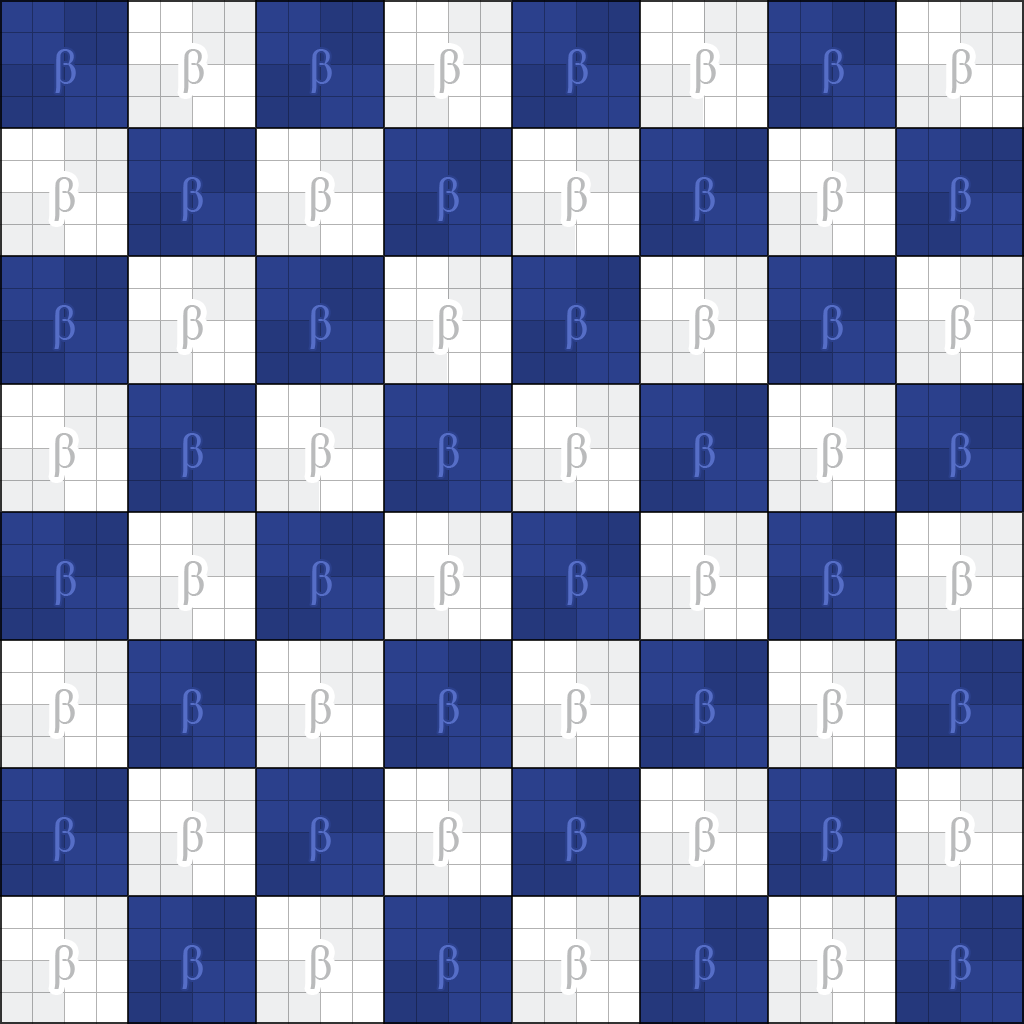
<style>
.page{position:relative;width:1024px;height:1024px;background:#ffffff}
.page>*{position:absolute;margin:0}
.t1{font:48px "TimesNewRomanPSMT";letter-spacing:0.12em;color:#566ec7}
.t2{font:48px "TimesNewRomanPSMT";letter-spacing:0.12em;color:#babbbc}
</style>
<div class="page">
<p class="t1" style="left:55px;top:49px;width:21px;height:44px">β</p>
<p class="t2" style="left:183px;top:49px;width:21px;height:44px">β</p>
<p class="t1" style="left:311px;top:49px;width:21px;height:44px">β</p>
<p class="t2" style="left:439px;top:49px;width:21px;height:44px">β</p>
<p class="t1" style="left:567px;top:49px;width:21px;height:44px">β</p>
<p class="t2" style="left:695px;top:49px;width:21px;height:44px">β</p>
<p class="t1" style="left:823px;top:49px;width:21px;height:44px">β</p>
<p class="t2" style="left:951px;top:49px;width:21px;height:44px">β</p>
<p class="t2" style="left:54px;top:177px;width:21px;height:44px">β</p>
<p class="t1" style="left:182px;top:177px;width:21px;height:44px">β</p>
<p class="t2" style="left:310px;top:177px;width:21px;height:44px">β</p>
<p class="t1" style="left:438px;top:177px;width:21px;height:44px">β</p>
<p class="t2" style="left:566px;top:177px;width:21px;height:44px">β</p>
<p class="t1" style="left:694px;top:177px;width:21px;height:44px">β</p>
<p class="t2" style="left:822px;top:177px;width:21px;height:44px">β</p>
<p class="t1" style="left:950px;top:177px;width:21px;height:44px">β</p>
<p class="t1" style="left:54px;top:305px;width:21px;height:44px">β</p>
<p class="t2" style="left:182px;top:305px;width:21px;height:44px">β</p>
<p class="t1" style="left:310px;top:305px;width:21px;height:44px">β</p>
<p class="t2" style="left:438px;top:305px;width:21px;height:44px">β</p>
<p class="t1" style="left:566px;top:305px;width:21px;height:44px">β</p>
<p class="t2" style="left:694px;top:305px;width:21px;height:44px">β</p>
<p class="t1" style="left:822px;top:305px;width:21px;height:44px">β</p>
<p class="t2" style="left:950px;top:305px;width:21px;height:44px">β</p>
<p class="t2" style="left:54px;top:433px;width:21px;height:44px">β</p>
<p class="t1" style="left:182px;top:433px;width:21px;height:44px">β</p>
<p class="t2" style="left:310px;top:433px;width:21px;height:44px">β</p>
<p class="t1" style="left:438px;top:433px;width:21px;height:44px">β</p>
<p class="t2" style="left:566px;top:433px;width:21px;height:44px">β</p>
<p class="t1" style="left:694px;top:433px;width:21px;height:44px">β</p>
<p class="t2" style="left:822px;top:433px;width:21px;height:44px">β</p>
<p class="t1" style="left:950px;top:433px;width:21px;height:44px">β</p>
<p class="t1" style="left:55px;top:561px;width:21px;height:44px">β</p>
<p class="t2" style="left:183px;top:561px;width:21px;height:44px">β</p>
<p class="t1" style="left:311px;top:561px;width:21px;height:44px">β</p>
<p class="t2" style="left:439px;top:561px;width:21px;height:44px">β</p>
<p class="t1" style="left:567px;top:561px;width:21px;height:44px">β</p>
<p class="t2" style="left:695px;top:561px;width:21px;height:44px">β</p>
<p class="t1" style="left:823px;top:561px;width:21px;height:44px">β</p>
<p class="t2" style="left:951px;top:561px;width:21px;height:44px">β</p>
<p class="t2" style="left:54px;top:689px;width:21px;height:44px">β</p>
<p class="t1" style="left:182px;top:689px;width:21px;height:44px">β</p>
<p class="t2" style="left:310px;top:689px;width:21px;height:44px">β</p>
<p class="t1" style="left:438px;top:689px;width:21px;height:44px">β</p>
<p class="t2" style="left:566px;top:689px;width:21px;height:44px">β</p>
<p class="t1" style="left:694px;top:689px;width:21px;height:44px">β</p>
<p class="t2" style="left:822px;top:689px;width:21px;height:44px">β</p>
<p class="t1" style="left:950px;top:689px;width:21px;height:44px">β</p>
<p class="t1" style="left:54px;top:817px;width:21px;height:44px">β</p>
<p class="t2" style="left:182px;top:817px;width:21px;height:44px">β</p>
<p class="t1" style="left:310px;top:817px;width:21px;height:44px">β</p>
<p class="t2" style="left:438px;top:817px;width:21px;height:44px">β</p>
<p class="t1" style="left:566px;top:817px;width:21px;height:44px">β</p>
<p class="t2" style="left:694px;top:817px;width:21px;height:44px">β</p>
<p class="t1" style="left:822px;top:817px;width:21px;height:44px">β</p>
<p class="t2" style="left:950px;top:817px;width:21px;height:44px">β</p>
<p class="t2" style="left:54px;top:945px;width:21px;height:44px">β</p>
<p class="t1" style="left:182px;top:945px;width:21px;height:44px">β</p>
<p class="t2" style="left:310px;top:945px;width:21px;height:44px">β</p>
<p class="t1" style="left:438px;top:945px;width:21px;height:44px">β</p>
<p class="t2" style="left:566px;top:945px;width:21px;height:44px">β</p>
<p class="t1" style="left:694px;top:945px;width:21px;height:44px">β</p>
<p class="t2" style="left:822px;top:945px;width:21px;height:44px">β</p>
<p class="t1" style="left:950px;top:945px;width:21px;height:44px">β</p>
</div>
